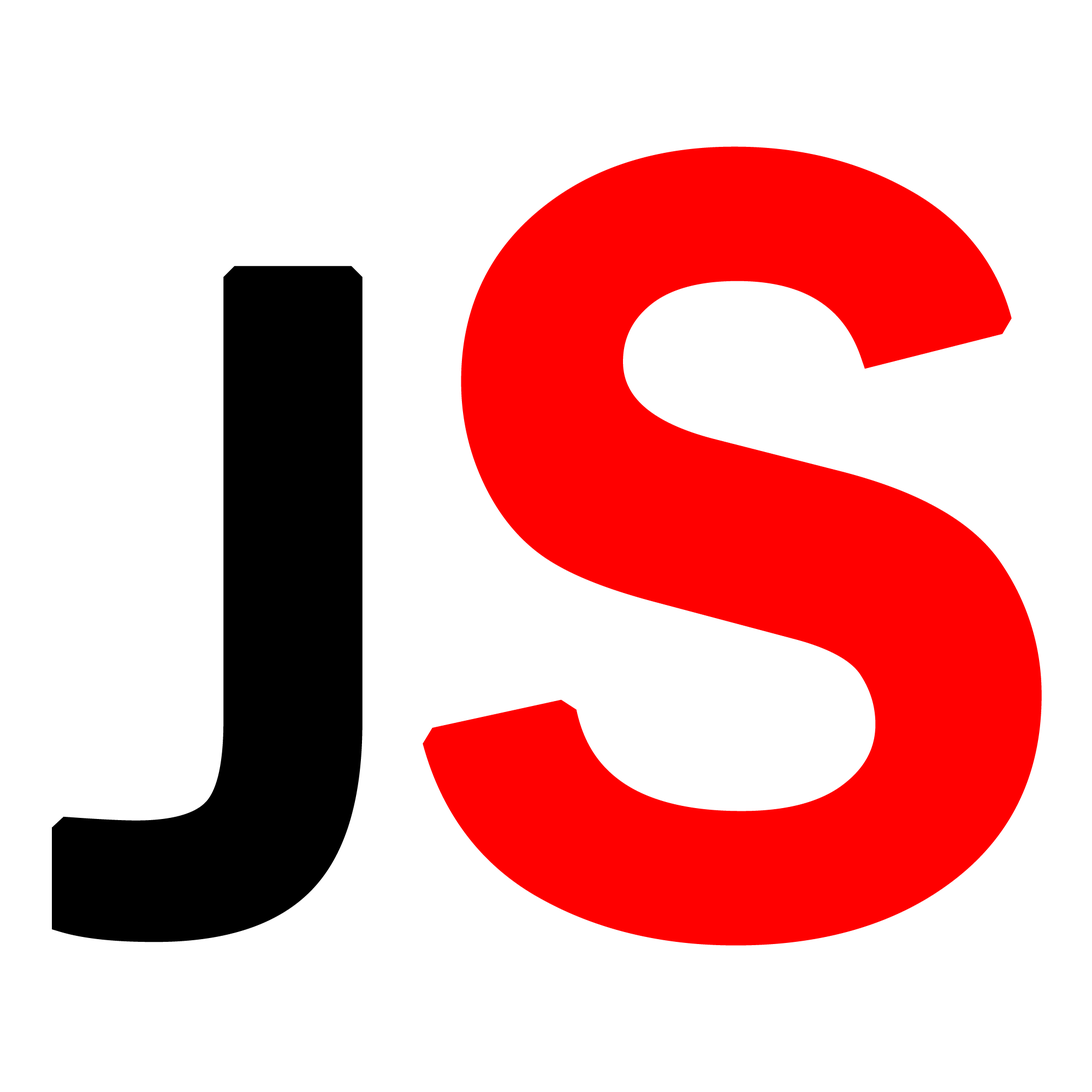
<style>
.page{position:relative;width:1092px;height:1092px;background:#ffffff}
.page>*{position:absolute;margin:0}
.t1{font:966.2px "FranklinGothic-Medium";letter-spacing:-0.01em;color:#000000;font-weight:bold}
.t2{font:1125.4px "FranklinGothic-Medium";letter-spacing:-0.01em;color:#ff0000;font-weight:bold}
</style>
<div class="page">
<p class="t1" style="left:52px;top:146px;width:990px;height:800px">J<span class="t2">S</span></p>
</div>
